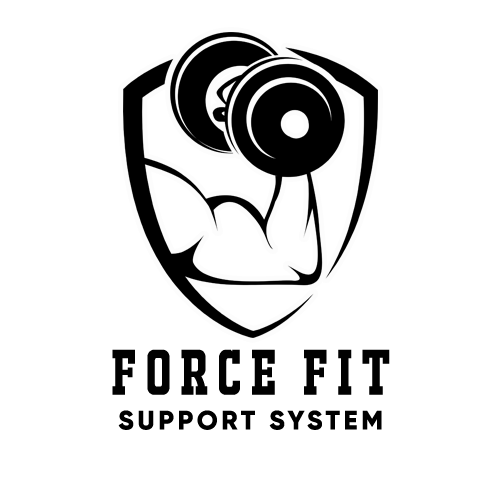
<style>
.page{position:relative;width:500px;height:500px;background:#ffffff}
.page>*{position:absolute;margin:0}
.t1{font:61.7px "JACKPORTREGULARNCV";letter-spacing:0.14em;color:#010101;text-transform:uppercase}
.t2{font:26.5px "Gilroy-ExtraBold";letter-spacing:0.14em;color:#000000;text-transform:uppercase}
</style>
<div class="page">
<p class="t1" style="left:112px;top:349px;width:278px;height:46px">force fit</p>
<p class="t2" style="left:118px;top:410px;width:264px;height:20px">support system</p>
</div>
